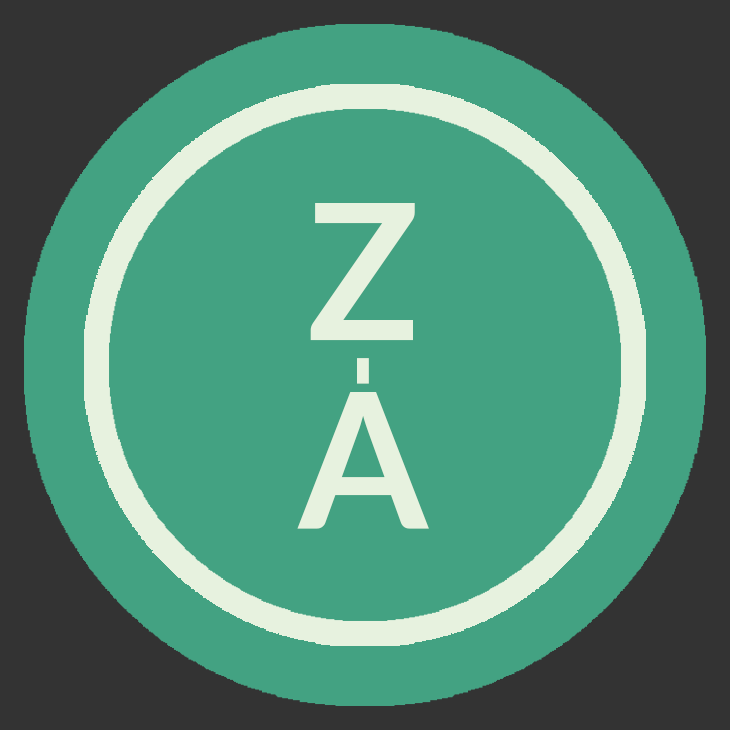
<style>
.page{position:relative;width:730px;height:730px;background:#43a282}
.page>*{position:absolute;margin:0}
.t1{font:141.1px "Lato-Bold";color:#e7f2df;scale:1.77 1}
.t2{font:154.2px "Lato-Regular";color:#e7f2df;scale:0.67 1}
</style>
<div class="page">
<p class="t1" style="left:297px;top:203px;width:132px;height:326px;text-align:center">ZA</p>
<p class="t2" style="left:357px;top:358px;width:12px;height:26px;rotate:90deg">-</p>
</div>
